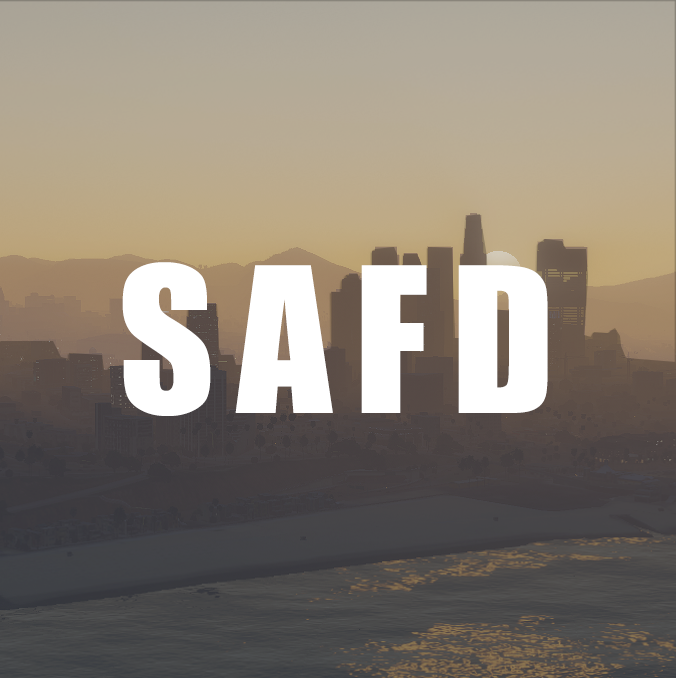
<style>
.page{position:relative;width:676px;height:678px}
.page>*{position:absolute;margin:0}
.t1{font:186.7px "Impact";letter-spacing:0.12em;color:#ffffff}
</style>
<div class="page">
<p class="t1" style="left:122px;top:262px;width:426px;height:154px">SAFD</p>
</div>
